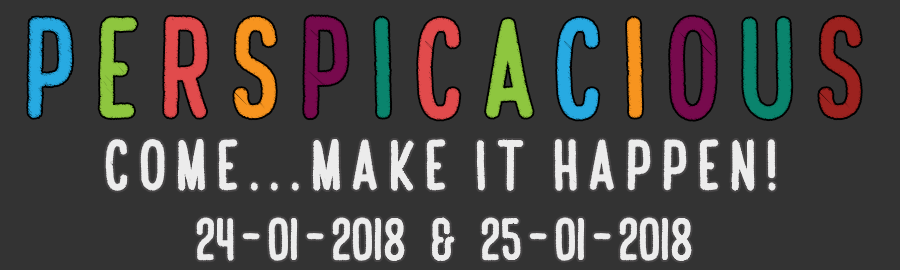
<style>
.page{position:relative;width:900px;height:270px;background:#333333}
.page>*{position:absolute;margin:0}
.t1{font:110px "CafFranoise";letter-spacing:0.18em;color:#27aae2}
.t2{font:110px "CafFranoise";letter-spacing:0.18em;color:#8ec63f}
.t3{font:110px "CafFranoise";letter-spacing:0.18em;color:#e14b4c}
.t4{font:110px "CafFranoise";letter-spacing:0.18em;color:#f7941f}
.t5{font:110px "CafFranoise";letter-spacing:0.18em;color:#770a4d}
.t6{font:110px "CafFranoise";letter-spacing:0.18em;color:#0a846d}
.t7{font:110px "CafFranoise";letter-spacing:0.18em;color:#9c221f}
.t8{font:55px "CafFranoise";letter-spacing:0.18em;color:#ececec}
.t9{font:46px "CafFranoise";color:#ececec}
</style>
<div class="page">
<p class="t1" style="left:28px;top:16px;width:833px;height:104px">P<span class="t2">e</span><span class="t3">r</span><span class="t4">s</span><span class="t5">p</span><span class="t6">i</span><span class="t3">c</span><span class="t2">a</span>c<span class="t4">i</span><span class="t5">o</span><span class="t6">u</span><span class="t7">s</span></p>
<p class="t8" style="left:105px;top:139px;width:671px;height:52px">COME...MAKE IT HAPPEn!</p>
<p class="t9" style="left:196px;top:217px;width:496px;height:44px">24 - 01 - 2018    &amp;    25 - 01 - 2018</p>
</div>
